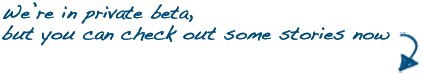
<style>
.page{position:relative;width:422px;height:74px;background:#ffffff}
.page>*{position:absolute;margin:0}
.t1{font:17.7px "Handwriting-Dakota";color:#004c7c;font-weight:bold}
</style>
<div class="page">
<p class="t1" style="left:2px;top:2px;width:388px;height:44px">We’re in private beta,<br>but you can check out some stories now</p>
<p class="t1" style="left:2px;top:2px;width:388px;height:44px">We’re in private beta,<br>but you can check out some stories now</p>
</div>
